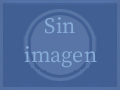
<style>
.page{position:relative;width:120px;height:90px;background:#425f93}
.page>*{position:absolute;margin:0}
.t1{font:24px "OfficialFateFont-Medium";color:#87acd6}
</style>
<div class="page">
<p class="t1" style="left:24px;top:17px;width:73px;height:51px;text-align:center">Sin imagen</p>
</div>
